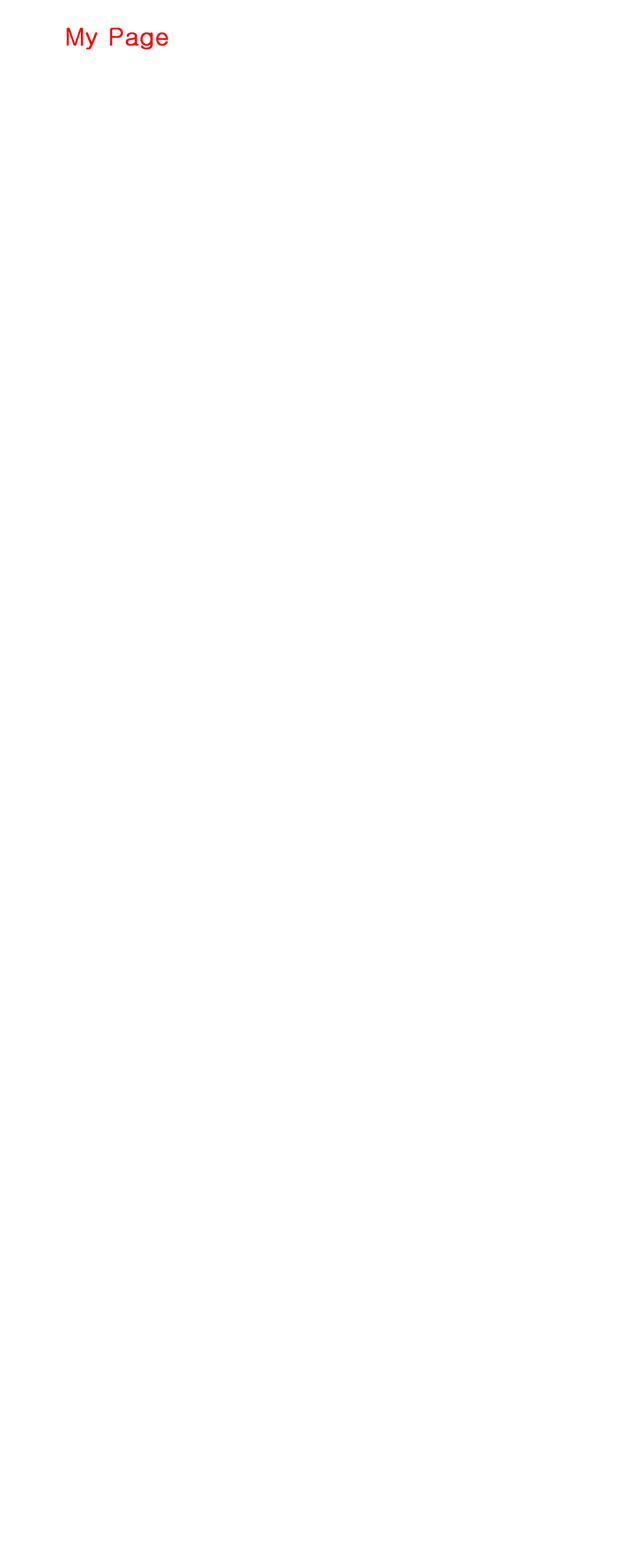
<style>
.page{position:relative;width:627px;height:1568px;background:#ffffff}
.page>*{position:absolute;margin:0}
.t1{font:25.1px "Gulim";color:#ff0000;font-weight:bold}
</style>
<div class="page">
<p class="t1" style="left:66px;top:28px;width:102px;height:22px">My Page</p>
</div>
